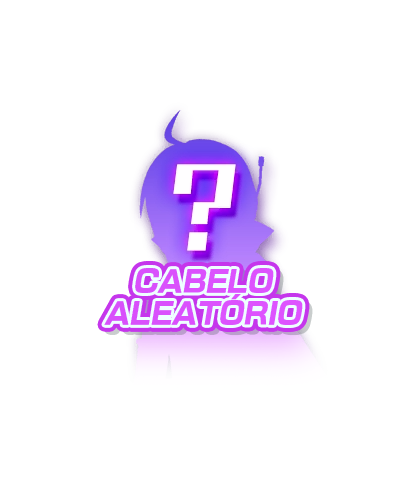
<style>
.page{position:relative;width:408px;height:494px;background:#ffffff}
.page>*{position:absolute;margin:0}
.t1{font:29.3px/32px "NewRodinPro-EB";color:#dd52ff;font-style:italic;scale:0.95 1}
</style>
<div class="page">
<p class="t1" style="left:104px;top:268px;width:199px;height:57px;text-align:center">CABELO<br>ALEATÓRIO</p>
</div>
